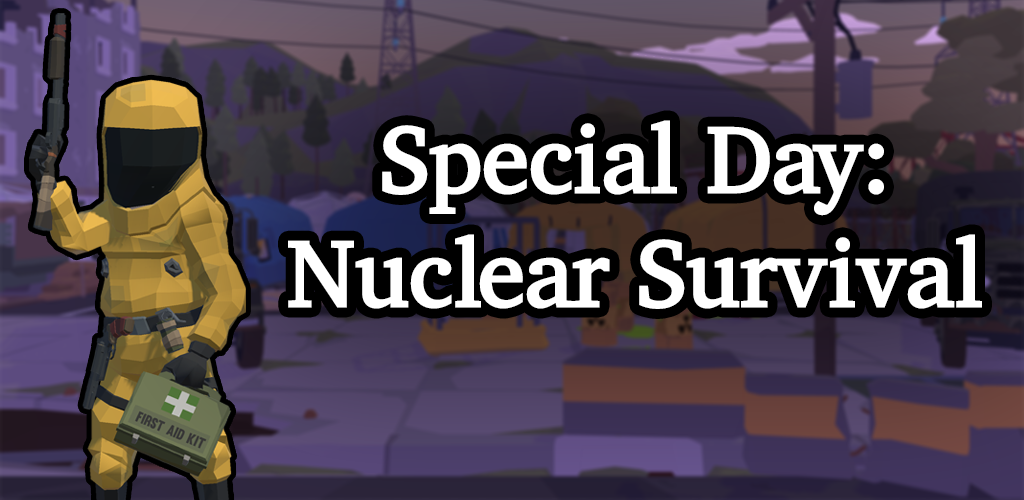
<style>
.page{position:relative;width:1024px;height:500px}
.page>*{position:absolute;margin:0}
.t1{font:94.9px "ChareInk";color:#ffffff}
</style>
<div class="page">
<p class="t1" style="left:288px;top:120px;width:694px;height:189px;text-align:center">Special Day:<br>Nuclear Survival</p>
</div>
